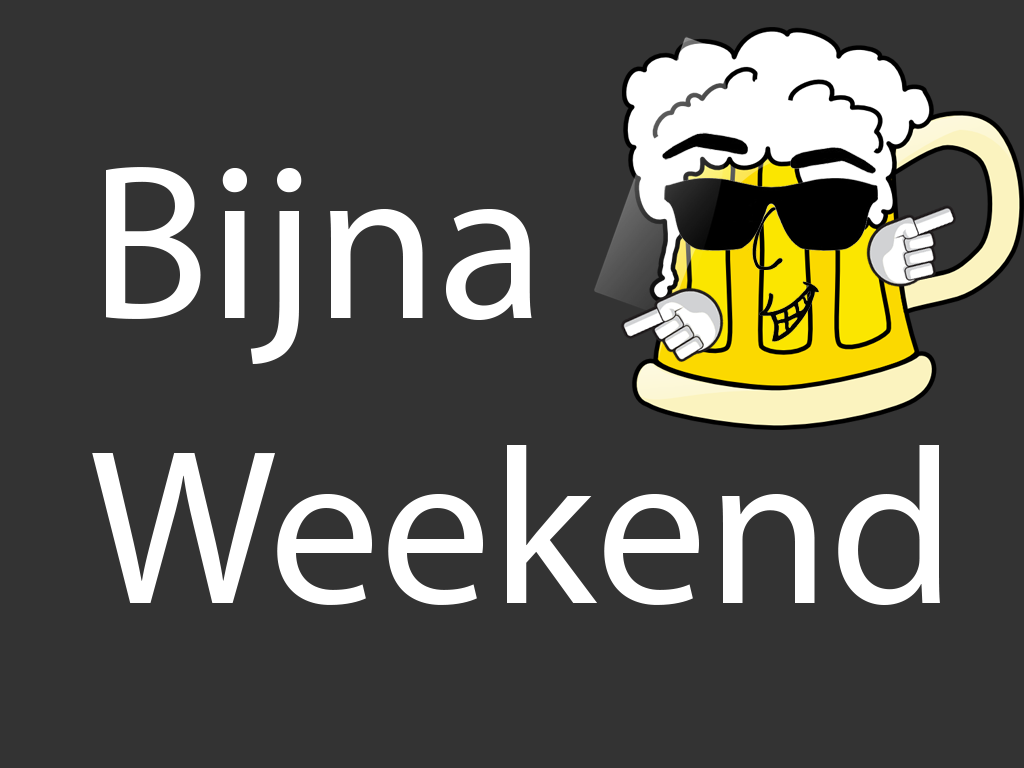
<style>
.page{position:relative;width:1024px;height:768px;background:#333333}
.page>*{position:absolute;margin:0}
.t1{font:222px/19px "MyriadPro-Regular";color:#ffffff}
</style>
<div class="page">
<p class="t1" style="left:92px;top:167px;width:848px;height:438px">Bijna<br><br><br><br><br><br><br><br><br><br><br><br><br><br><br>Weekend</p>
</div>
